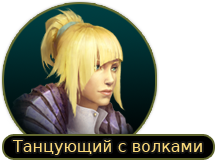
<style>
.page{position:relative;width:215px;height:160px;background:#ffffff}
.page>*{position:absolute;margin:0}
.t1{font:16px "DejaVuLGCSans";color:#f9d87a}
</style>
<div class="page">
<p class="t1" style="left:12px;top:140px;width:190px;height:15px">Танцующий с волками</p>
</div>
